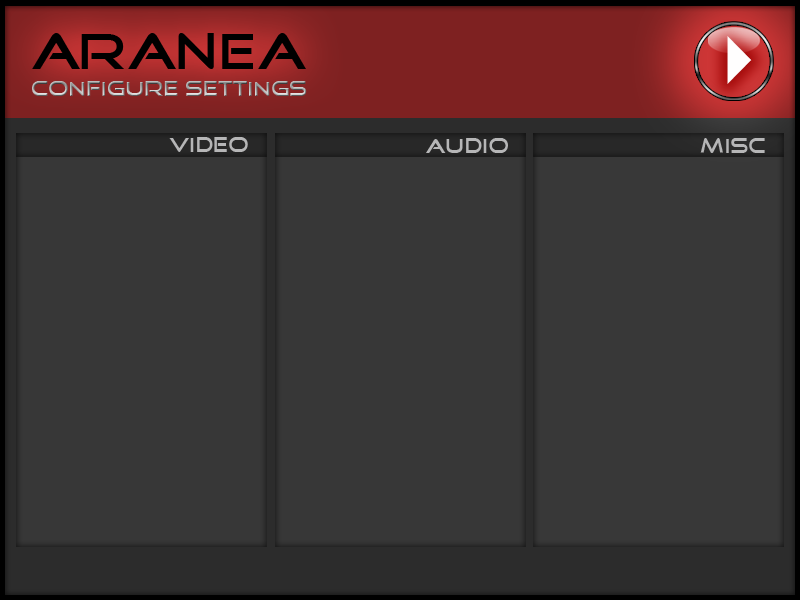
<style>
.page{position:relative;width:800px;height:600px;background:#373737}
.page>*{position:absolute;margin:0}
.t1{font:52px "GoodTimes";color:#000000}
.t2{font:21px "GoodTimes"}
.t3{font:21px "GoodTimes";color:#b6b6b7}
</style>
<div class="page">
<p class="t1" style="left:32px;top:33px;width:274px;height:36px">ARANEA</p>
<p class="t2" style="left:32px;top:81px;width:275px;height:15px">configure settings</p>
<p class="t3" style="left:169px;top:137px;width:79px;height:15px">VIDEO</p>
<p class="t3" style="left:426px;top:138px;width:82px;height:15px">AUDIO</p>
<p class="t3" style="left:700px;top:138px;width:65px;height:15px">MISC</p>
</div>
